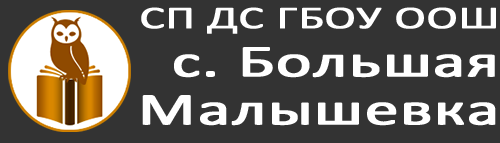
<style>
.page{position:relative;width:500px;height:143px;background:#333333}
.page>*{position:absolute;margin:0}
.t1{font:46px/48px "Calibri";color:#ffffff;font-weight:bold;scale:1.46 1}
.t2{font:32px/48px "Calibri";color:#ffffff;font-weight:bold;scale:1.46 1}
</style>
<div class="page">
<p class="t1" style="left:141px;top:7px;width:355px;height:119px;text-align:right"><span class="t2">СП ДС ГБОУ ООШ<br></span>с. Большая<br>Малышевка</p>
</div>
